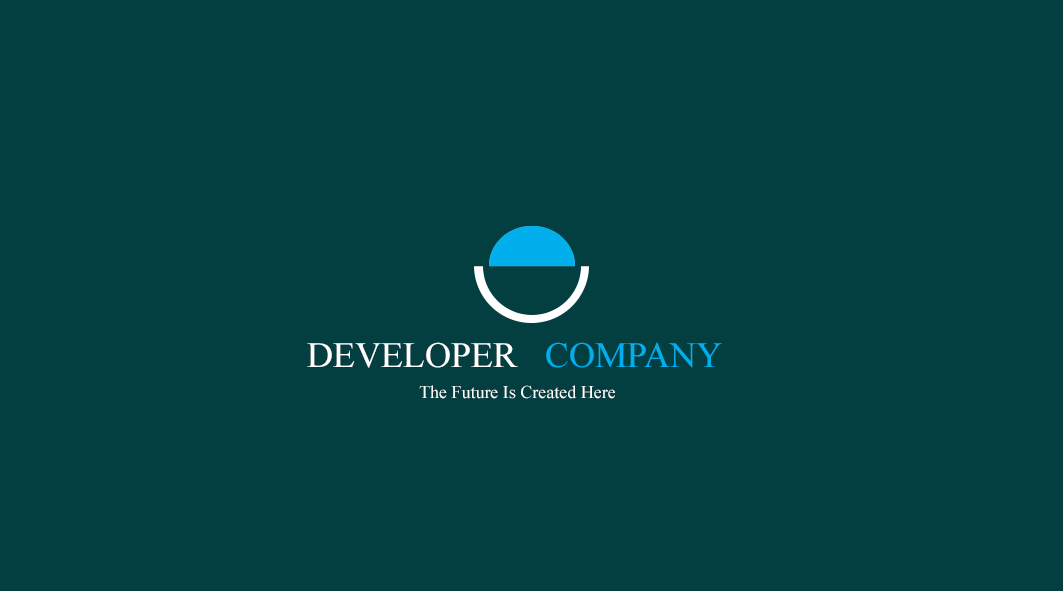
<style>
.page{position:relative;width:1063px;height:591px;background:#033f41}
.page>*{position:absolute;margin:0}
.t1{font:36px "TimesNewRomanPSMT";color:#ffffff}
.t2{font:36px "TimesNewRomanPSMT";color:#01afed}
.t3{font:18px "TimesNewRomanPSMT";color:#ffffff}
</style>
<div class="page">
<p class="t1" style="left:307px;top:342px;width:211px;height:26px">DEVELOPER</p>
<p class="t2" style="left:546px;top:342px;width:176px;height:26px">COMPANY</p>
<p class="t3" style="left:419px;top:385px;width:196px;height:14px">The Future Is Created Here</p>
</div>
